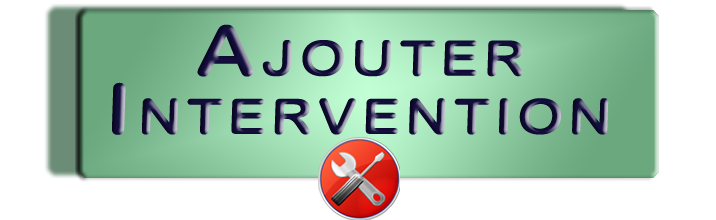
<style>
.page{position:relative;width:716px;height:220px;background:#ffffff}
.page>*{position:absolute;margin:0}
.t1{font:69.9px/19.4px "ArialRoundedMTBold";letter-spacing:0.075em;font-variant:small-caps;scale:1.19 1}
</style>
<div class="page">
<p class="t1" style="left:112px;top:24px;width:497px;height:111px;text-align:center">Ajouter<br><br><br>Intervention</p>
</div>
